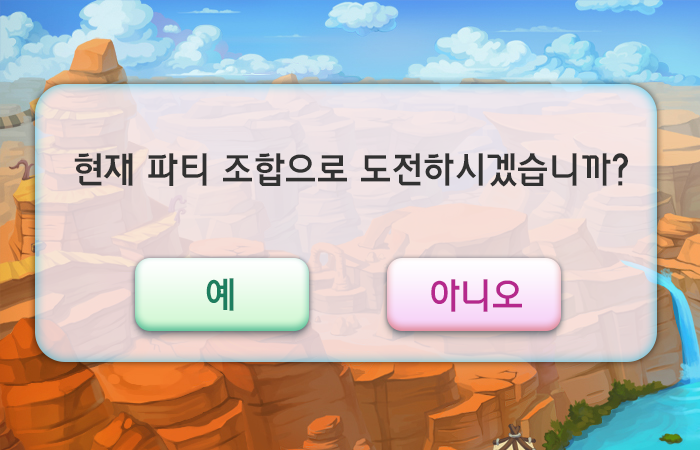
<style>
.page{position:relative;width:700px;height:450px}
.page>*{position:absolute;margin:0}
.t1{font:36px "BusanBada";color:#313131;scale:0.95 1}
.t2{font:36px "BusanBada";color:#1d7e5f;scale:0.95 1}
.t3{font:36px "BusanBada";color:#b5288c;scale:0.95 1}
</style>
<div class="page">
<p class="t1" style="left:74px;top:153px;width:554px;height:34px">현재 파티 조합으로 도전하시겠습니까?</p>
<p class="t2" style="left:206px;top:278px;width:28px;height:33px">예</p>
<p class="t3" style="left:431px;top:279px;width:91px;height:33px">아니오</p>
</div>
